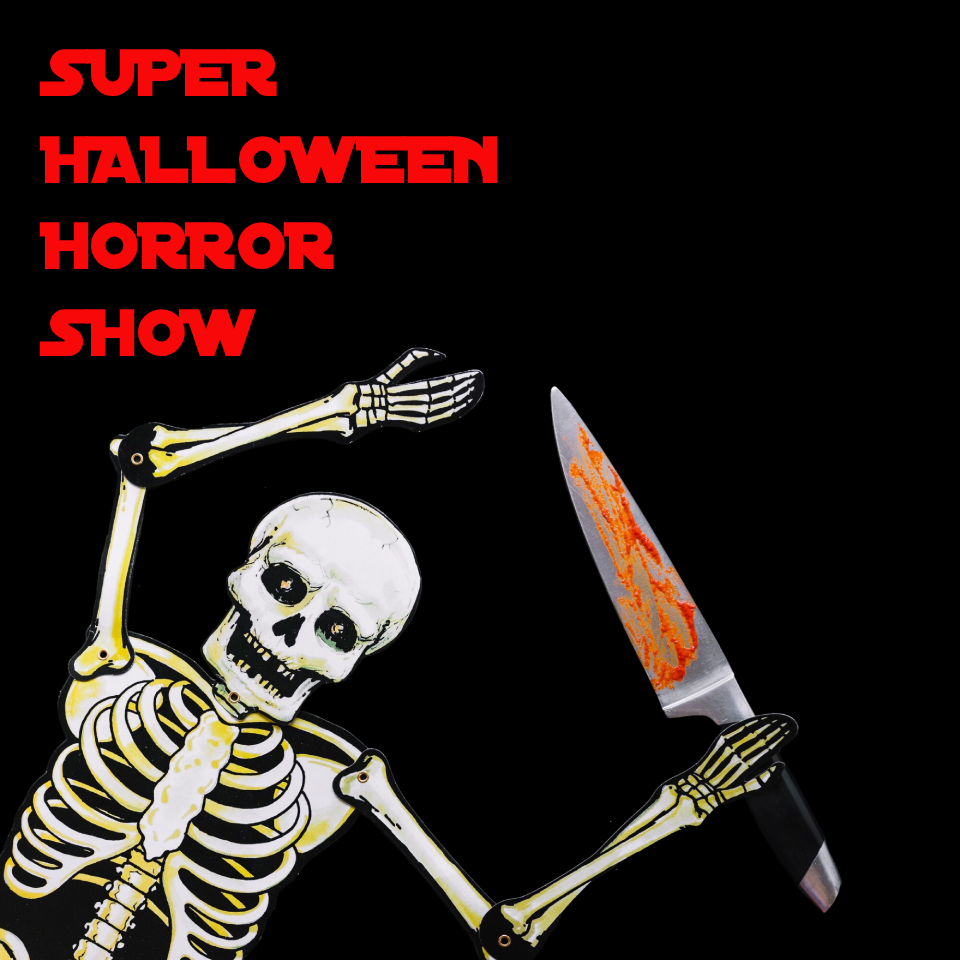
<style>
.page{position:relative;width:960px;height:960px;background:#000000}
.page>*{position:absolute;margin:0}
.t1{font:72px "DistantGalaxy";color:#f80808}
</style>
<div class="page">
<p class="t1" style="left:39px;top:49px;width:459px;height:307px">SUPER<br>HALLOWEEN<br>HORROR<br>SHOW</p>
</div>
